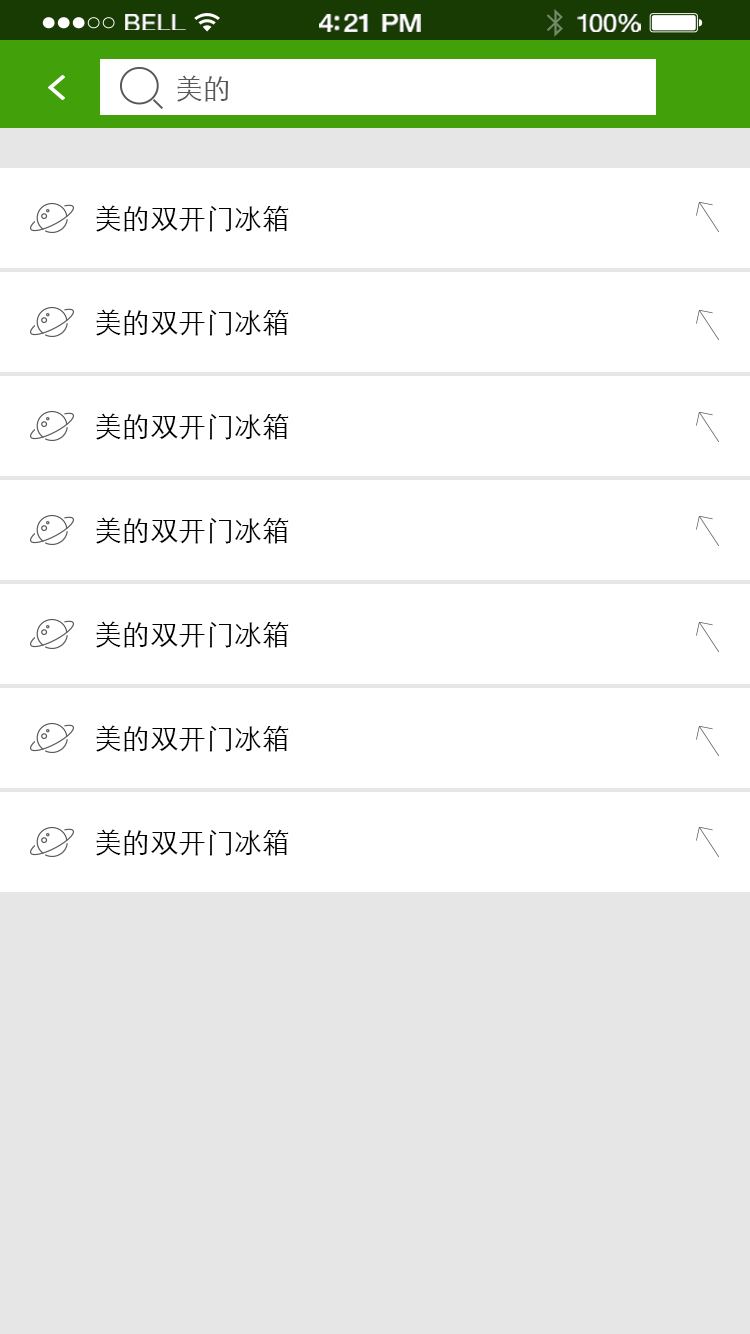
<style>
.page{position:relative;width:750px;height:1334px;background:#ffffff}
.page>*{position:absolute;margin:0}
.t1{font:23.3px "HelveticaNeue";letter-spacing:0.02em;color:#ffffff;scale:1.06 1}
.t2{font:25.3px "HelveticaNeue-Medium";letter-spacing:-0.02em;color:#ffffff;scale:1.06 1}
.t3{font:24.3px "HelveticaNeue";letter-spacing:-0.02em;color:#ffffff;scale:1.06 1}
.t4{font:28px "STXihei";color:#595757}
.t5{font:28px "STXihei";color:#000000}
</style>
<div class="page">
<p class="t1" style="left:125px;top:14px;width:61px;height:16px">BELL</p>
<p class="t2" style="left:319px;top:14px;width:102px;height:18px">4:21 PM</p>
<p class="t3" style="left:577px;top:14px;width:64px;height:18px">100%</p>
<p class="t4" style="left:177px;top:75px;width:52px;height:27px">美的</p>
<p class="t5" style="left:96px;top:205px;width:193px;height:27px">美的双开门冰箱</p>
<p class="t5" style="left:96px;top:309px;width:193px;height:27px">美的双开门冰箱</p>
<p class="t5" style="left:96px;top:413px;width:193px;height:27px">美的双开门冰箱</p>
<p class="t5" style="left:96px;top:517px;width:193px;height:27px">美的双开门冰箱</p>
<p class="t5" style="left:96px;top:621px;width:193px;height:27px">美的双开门冰箱</p>
<p class="t5" style="left:96px;top:725px;width:193px;height:27px">美的双开门冰箱</p>
<p class="t5" style="left:96px;top:829px;width:193px;height:27px">美的双开门冰箱</p>
</div>
